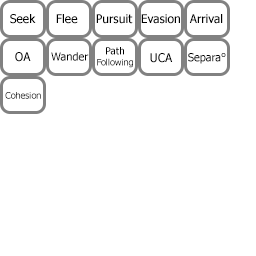
<style>
.page{position:relative;width:256px;height:256px;background:#ffffff}
.page>*{position:absolute;margin:0}
.t1{font:12px "Tahoma";color:#000000}
.t2{font:11px "Tahoma";color:#000000}
.t3{font:9px "Tahoma";color:#000000}
.t4{font:10px "Tahoma";color:#000000}
.t5{font:9px "Tahoma"}
</style>
<div class="page">
<p class="t1" style="left:10px;top:14px;width:26px;height:10px">Seek</p>
<p class="t1" style="left:56px;top:14px;width:22px;height:10px">Flee</p>
<p class="t1" style="left:96px;top:14px;width:37px;height:10px">Pursuit</p>
<p class="t1" style="left:141px;top:14px;width:39px;height:10px">Evasion</p>
<p class="t1" style="left:189px;top:14px;width:34px;height:10px">Arrival</p>
<p class="t1" style="left:15px;top:52px;width:16px;height:10px">OA</p>
<p class="t2" style="left:51px;top:52px;width:38px;height:9px">Wander</p>
<p class="t3" style="left:97px;top:47px;width:36px;height:21px;text-align:center"><span class="t4">Path<br></span>Following</p>
<p class="t1" style="left:150px;top:53px;width:23px;height:10px">UCA</p>
<p class="t2" style="left:188px;top:53px;width:38px;height:11px">Separa°</p>
<p class="t5" style="left:5px;top:92px;width:36px;height:7px">Cohesion</p>
</div>
